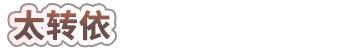
<style>
.page{position:relative;width:360px;height:50px;background:#ffffff}
.page>*{position:absolute;margin:0}
.t1{font:32px "SourceHanSansSC-Bold";color:#73534d;font-weight:bold}
</style>
<div class="page">
<p class="t1" style="left:13px;top:9px;width:98px;height:32px">太转依</p>
</div>
